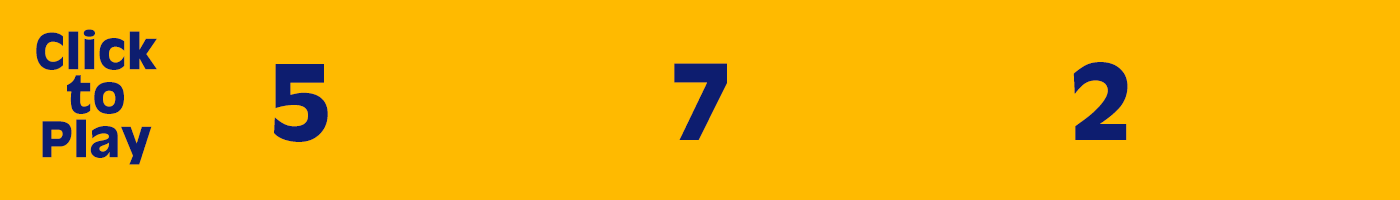
<style>
.page{position:relative;width:1400px;height:200px;background:#ffba00}
.page>*{position:absolute;margin:0}
.t1{font:48px/30px "AntiqueOlive-Bold";letter-spacing:0.01em;color:#0d1d6f}
.t2{font:100px "AntiqueOlive-Bold";letter-spacing:0.01em;color:#0d1d6f}
</style>
<div class="page">
<p class="t1" style="left:36px;top:29px;width:121px;height:136px;text-align:center">Click<br>to<br>Play</p>
<p class="t2" style="left:274px;top:64px;width:54px;height:78px">5</p>
<p class="t2" style="left:674px;top:63px;width:53px;height:77px">7</p>
<p class="t2" style="left:1073px;top:62px;width:55px;height:78px">2</p>
</div>
